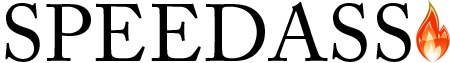
<style>
.page{position:relative;width:450px;height:63px;background:#ffffff}
.page>*{position:absolute;margin:0}
.t1{font:80px "ACaslonPro-Regular";color:#000000}
</style>
<div class="page">
<p class="t1" style="left:5px;top:1px;width:406px;height:61px">SPEEDASS</p>
</div>
